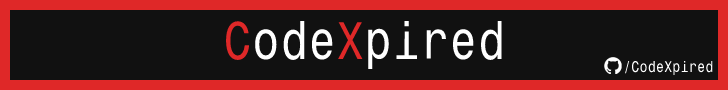
<style>
.page{position:relative;width:728px;height:90px;background:#111111}
.page>*{position:absolute;margin:0}
.t1{font:48px "MonospaceTypewriter";color:#ffffff}
.t2{font:48px "MonospaceTypewriter";color:#df2828}
.t3{font:14px "MonospaceTypewriter";color:#ffffff}
</style>
<div class="page">
<p class="t1" style="left:226px;top:21px;width:276px;height:48px"><span class="t2">C</span>ode<span class="t2">X</span>pired</p>
<p class="t3" style="left:625px;top:61px;width:88px;height:14px">/CodeXpired</p>
</div>
